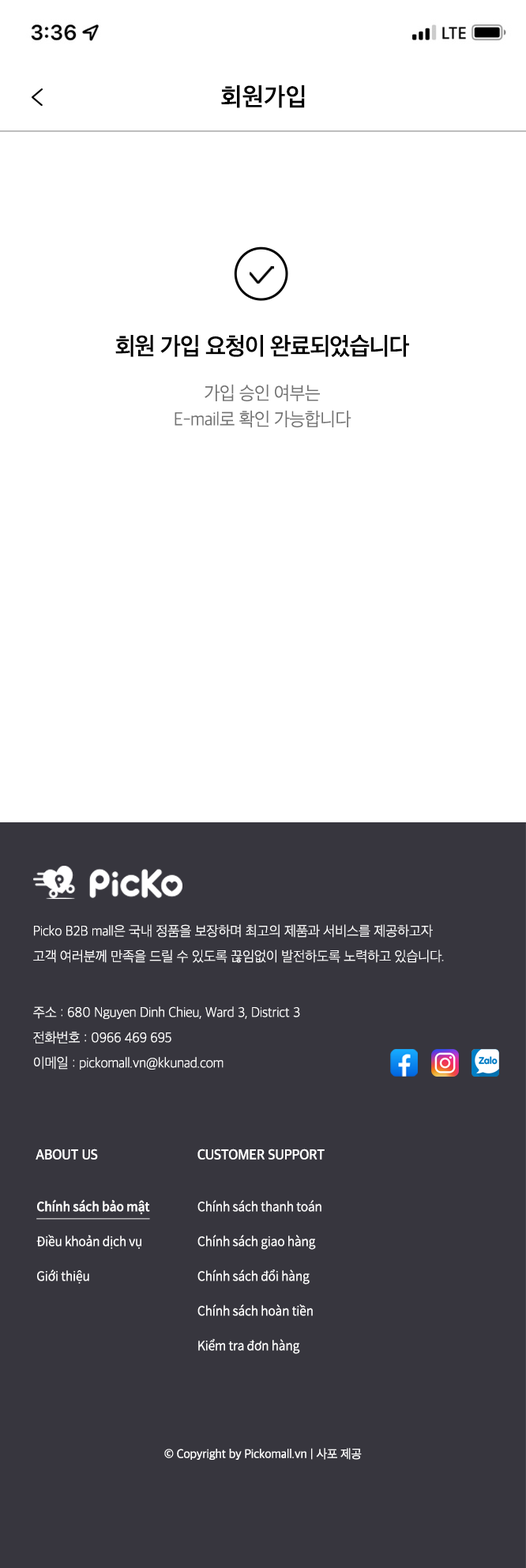
<style>
.page{position:relative;width:526px;height:1568px;background:#ffffff}
.page>*{position:absolute;margin:0}
.t1{font:25.3px "AppleSDGothicNeo-SemiBold";letter-spacing:0.017em;color:#000000}
.t2{font:24.5px "AppleSDGothicNeo-SemiBold";letter-spacing:-0.022em;color:#000000;scale:0.96 1}
.t3{font:19px/26.1px "AppleSDGothicNeo-Light";letter-spacing:-0.022em;color:#727272;scale:0.96 1}
.t4{font:14.2px/25.3px "AppleSDGothicNeo-UltraLight";letter-spacing:-0.01em;color:#ffffff;scale:0.97 1}
.t5{font:14.2px "AppleSDGothicNeo-SemiBold";letter-spacing:-0.01em;color:#ffffff;scale:0.97 1}
.t6{font:14.2px "AppleSDGothicNeo-SemiBold";letter-spacing:-0.01em;color:#ffffff;text-transform:uppercase;scale:0.97 1}
.t7{font:12.6px/34.8px "NotoSansCJKkr-DemiLight";letter-spacing:-0.01em;color:#ffffff;scale:0.97 1}
.t8{font:12.6px/34.8px "NotoSansCJKkr-Medium";letter-spacing:-0.01em;color:#ffffff;text-decoration:underline;scale:0.97 1}
.t9{font:12.6px "AppleSDGothicNeo-Regular";letter-spacing:-0.01em;color:#ffffff;scale:0.97 1}
</style>
<div class="page">
<p class="t1" style="left:221px;top:85px;width:84px;height:23px">회원가입</p>
<p class="t2" style="left:115px;top:335px;width:294px;height:23px">회원 가입 요청이 완료되었습니다</p>
<p class="t3" style="left:175px;top:384px;width:177px;height:44px;text-align:center">가입 승인 여부는<br>E-mail로 확인 가능합니다</p>
<p class="t4" style="left:33px;top:924px;width:411px;height:39px">Picko B2B mall은 국내 정품을 보장하며 최고의 제품과 서비스를 제공하고자<br>고객 여러분께 만족을 드릴 수 있도록 끊임없이 발전하도록 노력하고 있습니다.</p>
<p class="t4" style="left:33px;top:1006px;width:267px;height:64px">주소 : 680 Nguyen Dinh Chieu, Ward 3, District 3<br>전화번호 : 0966 469 695<br>이메일 : pickomall.vn@kkunad.com</p>
<p class="t5" style="left:36px;top:1149px;width:62px;height:11px">ABOUT US</p>
<p class="t6" style="left:197px;top:1149px;width:128px;height:11px">Customer Support</p>
<p class="t7" style="left:36px;top:1199px;width:114px;height:85px"><span class="t8">Chính sách bảo mật<br></span>Điều khoản dịch vụ<br>Giới thiệu</p>
<p class="t7" style="left:197px;top:1200px;width:124px;height:154px">Chính sách thanh toán<br>Chính sách giao hàng<br>Chính sách đổi hàng<br>Chính sách hoàn tiền<br>Kiểm tra đơn hàng</p>
<p class="t9" style="left:164px;top:1448px;width:198px;height:12px">© Copyright by Pickomall.vn | 사포 제공</p>
</div>
